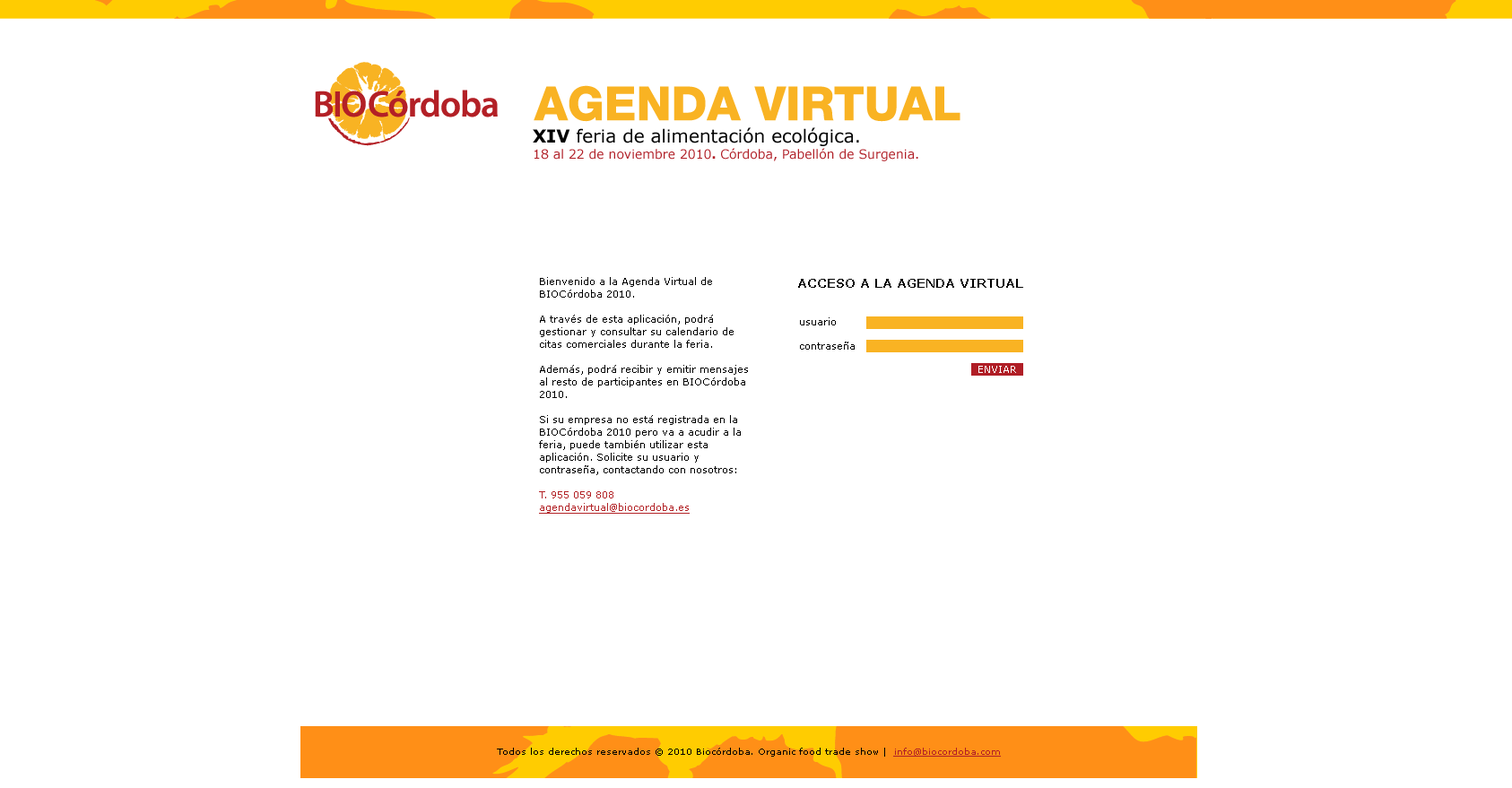
<style>
.page{position:relative;width:1512px;height:788px;background:#ffffff}
.page>*{position:absolute;margin:0}
.t1{font:17.9px/19.7px "Verdana";color:#000000}
.t2{font:17.9px/19.7px "Verdana-Bold";color:#000000}
.t3{font:12.6px/16.1px "Verdana";color:#b01e26}
.t4{font:12.6px/16.1px "Verdana-Bold";color:#b01e26}
.t5{font:9.9px/12.6px "Verdana";color:#000000}
.t6{font:9.9px/12.6px "Verdana";color:#b22226}
.t7{font:9.9px/12.6px "Verdana";color:#b22226;text-decoration:underline}
.t8{font:12.6px "Verdana-Bold";color:#000000}
.t9{font:9.9px "Verdana";color:#000000}
.t10{font:9.9px "Verdana";color:#ffffff}
.t11{font:9px "Verdana";color:#000000}
.t12{font:9px "Verdana";color:#b01e26;text-decoration:underline}
</style>
<div class="page">
<p class="t1" style="left:533px;top:127px;width:386px;height:34px"><span class="t2">XIV </span>feria de alimentación ecológica.<br><span class="t3">18 al 22 de noviembre 2010</span><span class="t4">. </span><span class="t3">Córdoba, Pabellón de Surgenia.</span></p>
<p class="t5" style="left:539px;top:277px;width:209px;height:237px">Bienvenido a la Agenda Virtual de BIOCórdoba 2010.<br><br>A través de esta aplicación, podrá gestionar y consultar su calendario de citas comerciales durante la feria.<br><br>Además, podrá recibir y emitir mensajes al resto de participantes en BIOCórdoba 2010.<br><br>Si su empresa no está registrada en la BIOCórdoba 2010 pero va a acudir a la feria, puede también utilizar esta aplicación. Solicite su usuario y contraseña, contactando con nosotros:<br><br><span class="t6">T. 955 059 808<br></span><span class="t7">agendavirtual@biocordoba.es</span></p>
<p class="t8" style="left:798px;top:279px;width:225px;height:9px">ACCESO A LA AGENDA VIRTUAL</p>
<p class="t9" style="left:800px;top:318px;width:36px;height:8px">usuario</p>
<p class="t9" style="left:800px;top:342px;width:55px;height:8px">contraseña</p>
<p class="t10" style="left:979px;top:366px;width:37px;height:7px">ENVIAR</p>
<p class="t11" style="left:497px;top:748px;width:504px;height:9px">Todos los derechos reservados © 2010 Biocórdoba. Organic food trade show |  <span class="t12">info@biocordoba.com</span></p>
</div>
